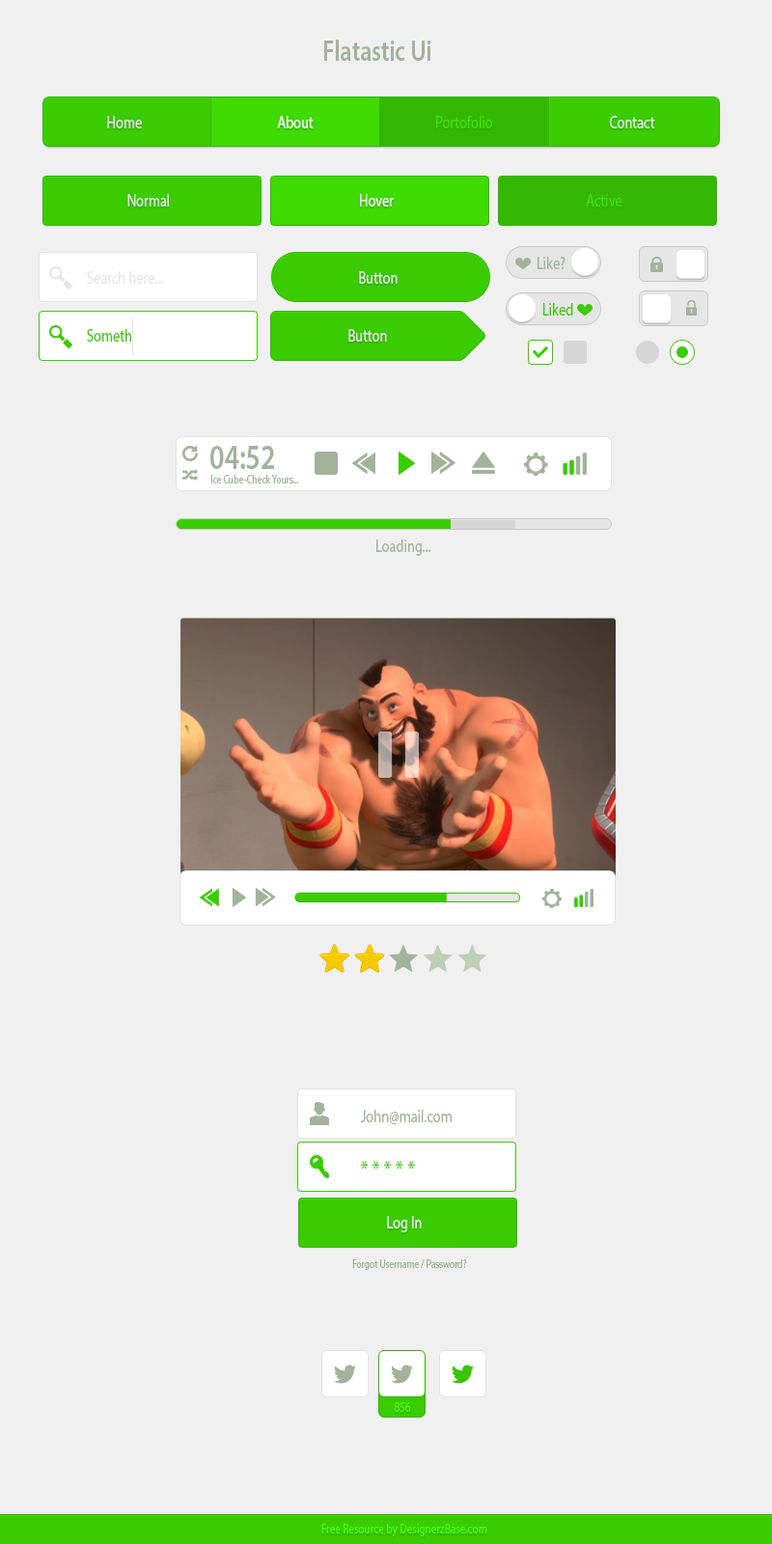
<style>
.page{position:relative;width:772px;height:1544px;background:#f1f0f0}
.page>*{position:absolute;margin:0}
.t1{font:17.4px "MyriadPro-Regular";color:#e6e6e6;scale:0.8 1}
.t2{font:17.4px "MyriadPro-Regular";color:#ffffff;scale:0.8 1}
.t3{font:17.4px "MyriadPro-Regular";color:#41e500;scale:0.8 1}
.t4{font:17.4px "MyriadPro-Regular";color:#a2b39b;scale:0.8 1}
.t5{font:17.4px "MyriadPro-Regular";color:#3acc00;scale:0.8 1}
.t6{font:34.7px "MyriadPro-Semibold";color:#a2b39b;scale:0.8 1}
.t7{font:11.6px "MyriadPro-Regular";color:#a2b39b;scale:0.8 1}
.t8{font:23.2px "MyriadPro-Regular";color:#3acc00;scale:0.8 1}
.t9{font:17.4px "MyriadPro-Regular";color:#f1f0f0;scale:0.8 1}
.t10{font:13.5px "MyriadPro-Regular";color:#49ff00;scale:0.8 1}
</style>
<div class="page">
<p class="t1" style="left:107px;top:116px;width:35px;height:12px">Home</p>
<p class="t2" style="left:277px;top:116px;width:37px;height:12px">About</p>
<p class="t3" style="left:436px;top:116px;width:56px;height:12px">Portofolio</p>
<p class="t1" style="left:610px;top:116px;width:45px;height:12px">Contact</p>
<p class="t1" style="left:127px;top:194px;width:42px;height:13px">Normal</p>
<p class="t2" style="left:360px;top:194px;width:34px;height:13px">Hover</p>
<p class="t3" style="left:586px;top:194px;width:37px;height:13px">Active</p>
<p class="t4" style="left:538px;top:257px;width:28px;height:12px">Like?</p>
<p class="t1" style="left:87px;top:271px;width:76px;height:13px">Search here...</p>
<p class="t1" style="left:359px;top:271px;width:39px;height:13px">Button</p>
<p class="t5" style="left:543px;top:303px;width:30px;height:13px">Liked</p>
<p class="t5" style="left:87px;top:329px;width:44px;height:13px">Someth</p>
<p class="t1" style="left:348px;top:329px;width:39px;height:13px">Button</p>
<p class="t6" style="left:210px;top:446px;width:64px;height:23px">04:52</p>
<p class="t7" style="left:210px;top:475px;width:89px;height:9px">Ice Cube-Check Yours...</p>
<p class="t4" style="left:376px;top:540px;width:54px;height:16px">Loading...</p>
<p class="t4" style="left:361px;top:1110px;width:91px;height:14px">John@mail.com</p>
<p class="t8" style="left:361px;top:1161px;width:54px;height:9px">* * * * *</p>
<p class="t9" style="left:387px;top:1216px;width:35px;height:17px">Log In</p>
<p class="t7" style="left:352px;top:1260px;width:115px;height:10px">Forgot Username / Password?</p>
<p class="t10" style="left:394px;top:1402px;width:17px;height:10px">856</p>
</div>
